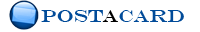
<style>
.page{position:relative;width:200px;height:32px;background:#ffffff}
.page>*{position:absolute;margin:0}
.t1{font:18px "EngraversMT";color:#014b99}
.t2{font:18px "EngraversMT";color:#000000}
</style>
<div class="page">
<p class="t1" style="left:41px;top:10px;width:143px;height:12px">POST<span class="t2">A</span>CARD</p>
</div>
